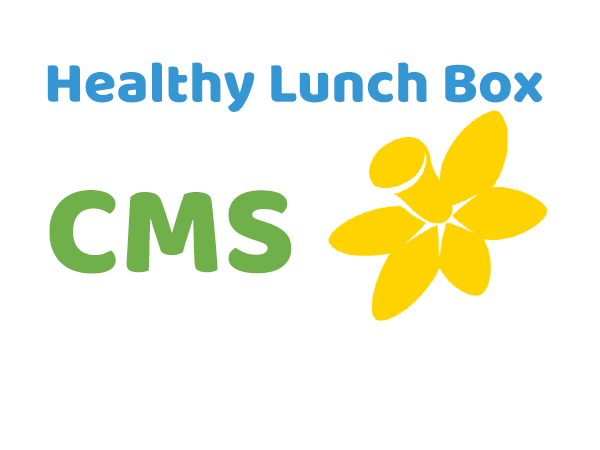
<style>
.page{position:relative;width:600px;height:450px;background:#ffffff}
.page>*{position:absolute;margin:0}
.t1{font:59.1px "Baloo-Regular";color:#3497d3}
.t2{font:129.6px "Baloo-Regular";color:#70b04a}
</style>
<div class="page">
<p class="t1" style="left:47px;top:62px;width:496px;height:50px">Healthy Lunch Box</p>
<p class="t2" style="left:49px;top:190px;width:243px;height:84px">CMS</p>
</div>
